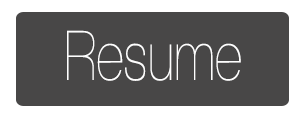
<style>
.page{position:relative;width:300px;height:113px;background:#484747}
.page>*{position:absolute;margin:0}
.t1{font:72px "WalkwayCondensed";color:#fefefe}
</style>
<div class="page">
<p class="t1" style="left:67px;top:30px;width:174px;height:51px">Resume</p>
</div>
